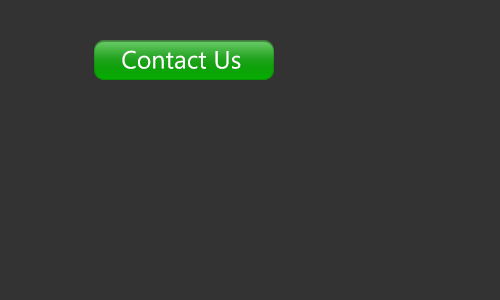
<style>
.page{position:relative;width:500px;height:300px;background:#333333}
.page>*{position:absolute;margin:0}
.t1{font:25px "MicrosoftPhagsPa";color:#ffffff}
</style>
<div class="page">
<p class="t1" style="left:122px;top:50px;width:119px;height:19px">Contact Us</p>
</div>
